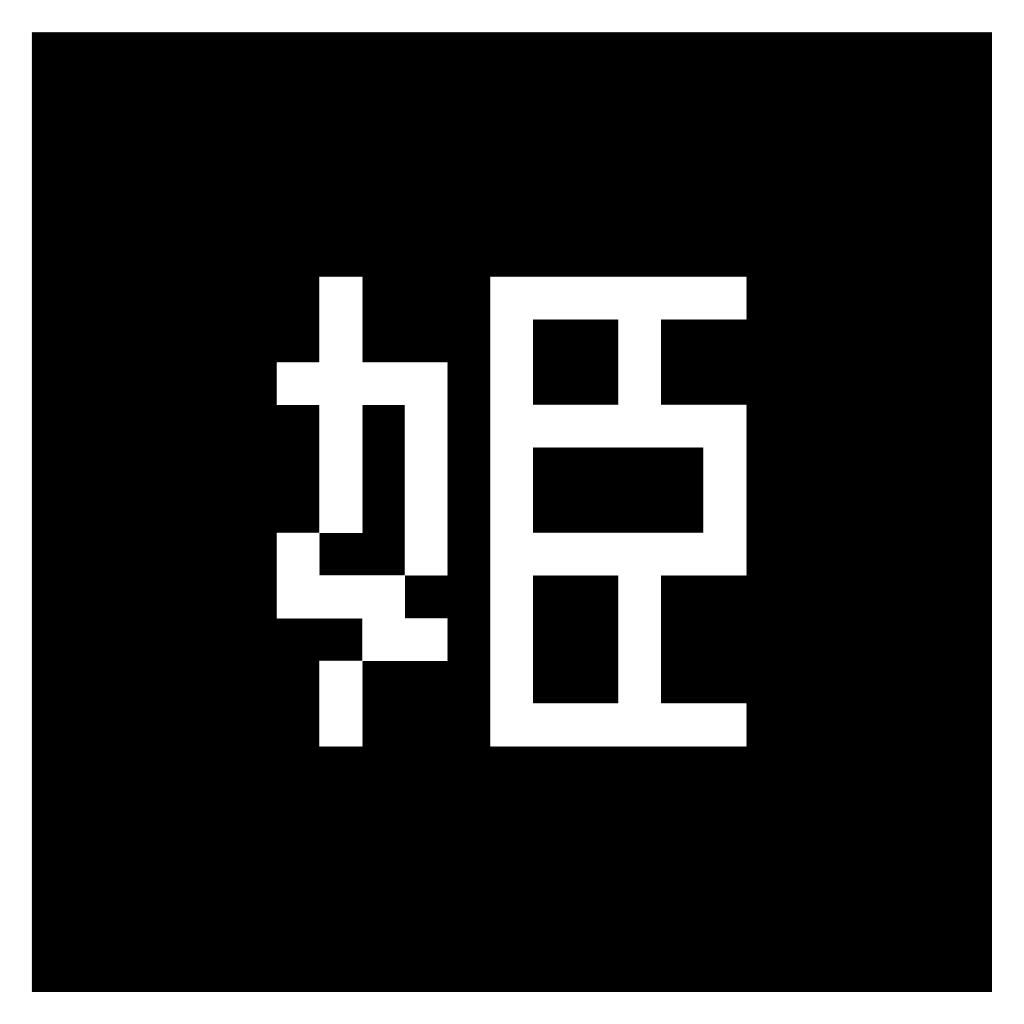
<style>
.page{position:relative;width:1024px;height:1024px;background:#000000}
.page>*{position:absolute;margin:0}
.t1{font:512px "PixelMplus12-Regular";color:#ffffff}
</style>
<div class="page">
<p class="t1" style="left:276px;top:276px;width:471px;height:471px">姫</p>
</div>
